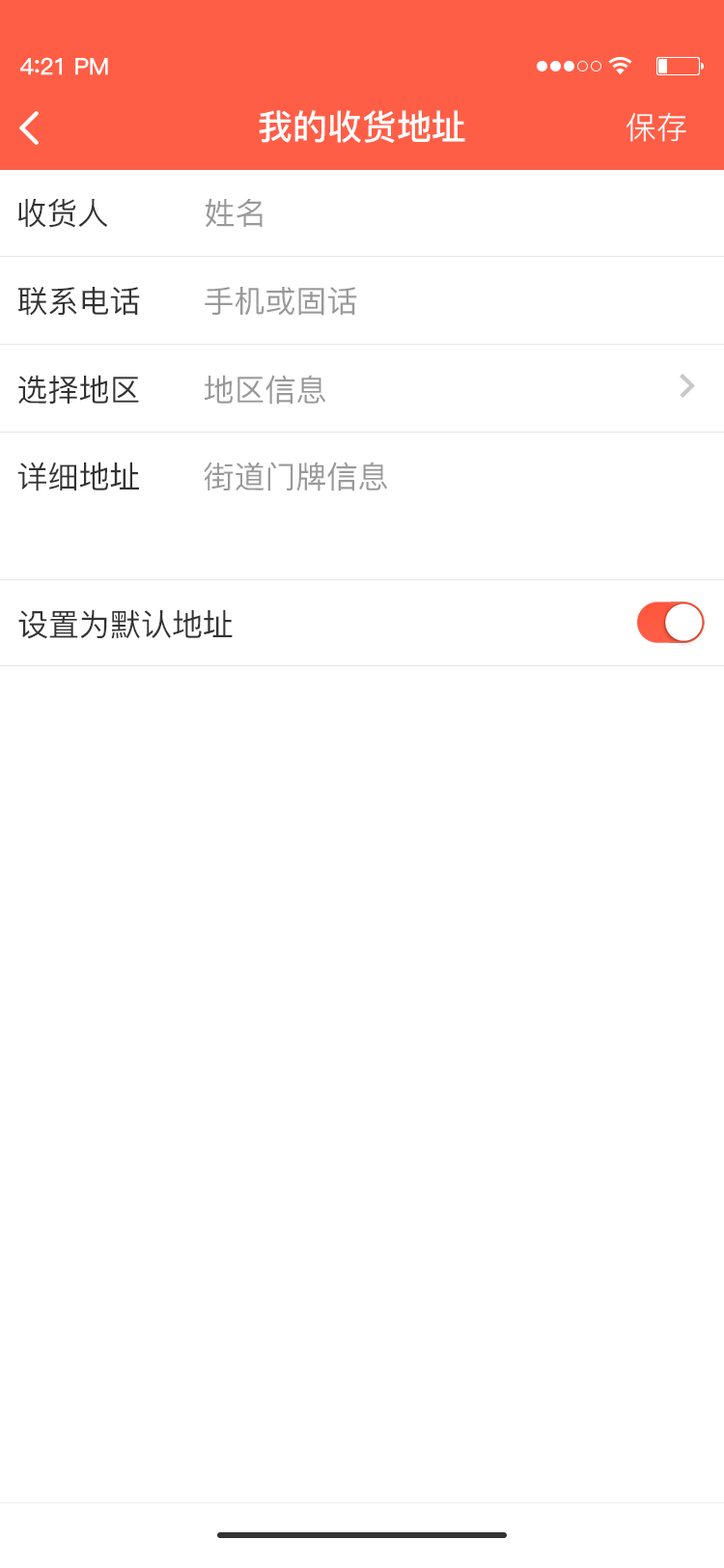
<style>
.page{position:relative;width:724px;height:1568px;background:#ffffff}
.page>*{position:absolute;margin:0}
.t1{font:23.2px "PingFang-SC-Bold";letter-spacing:-0.02em;color:#fefefe}
.t2{font:25.1px "PingFang-SC-Bold";letter-spacing:-0.02em;color:#fefefe}
.t3{font:34.8px "PingFang-SC-Bold";color:#ffffff}
.t4{font:30.9px "PingFang-SC-Regular";color:#ffffff}
.t5{font:30.9px "PingFang-SC-Medium";color:#333333}
.t6{font:30.9px "PingFang-SC-Medium";color:#999999}
</style>
<div class="page">
<p class="t1" style="left:20px;top:57px;width:88px;height:18px">4<span class="t2">:</span>21 PM</p>
<p class="t3" style="left:259px;top:110px;width:206px;height:33px">我的收货地址</p>
<p class="t4" style="left:627px;top:112px;width:59px;height:30px">保存</p>
<p class="t5" style="left:17px;top:198px;width:91px;height:30px">收货人</p>
<p class="t6" style="left:206px;top:198px;width:57px;height:30px">姓名</p>
<p class="t5" style="left:18px;top:287px;width:122px;height:29px">联系电话</p>
<p class="t6" style="left:205px;top:287px;width:152px;height:29px">手机或固话</p>
<p class="t5" style="left:18px;top:375px;width:121px;height:30px">选择地区</p>
<p class="t6" style="left:204px;top:375px;width:121px;height:30px">地区信息</p>
<p class="t5" style="left:17px;top:462px;width:122px;height:29px">详细地址</p>
<p class="t6" style="left:204px;top:462px;width:183px;height:29px">街道门牌信息</p>
<p class="t5" style="left:18px;top:609px;width:215px;height:30px">设置为默认地址</p>
</div>
